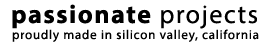
<style>
.page{position:relative;width:273px;height:45px;background:#ffffff}
.page>*{position:absolute;margin:0}
.t1{font:26px "MyriadPro-Bold";letter-spacing:0.06em;color:#000000}
.t2{font:26px "MyriadPro-Regular";letter-spacing:0.06em;color:#000000}
.t3{font:13px "MyriadPro-Regular";letter-spacing:0.06em;color:#000000}
</style>
<div class="page">
<p class="t1" style="left:12px;top:4px;width:245px;height:25px">passionate<span class="t2"> projects</span></p>
<p class="t3" style="left:12px;top:29px;width:247px;height:13px">proudly made in silicon valley, california</p>
</div>
